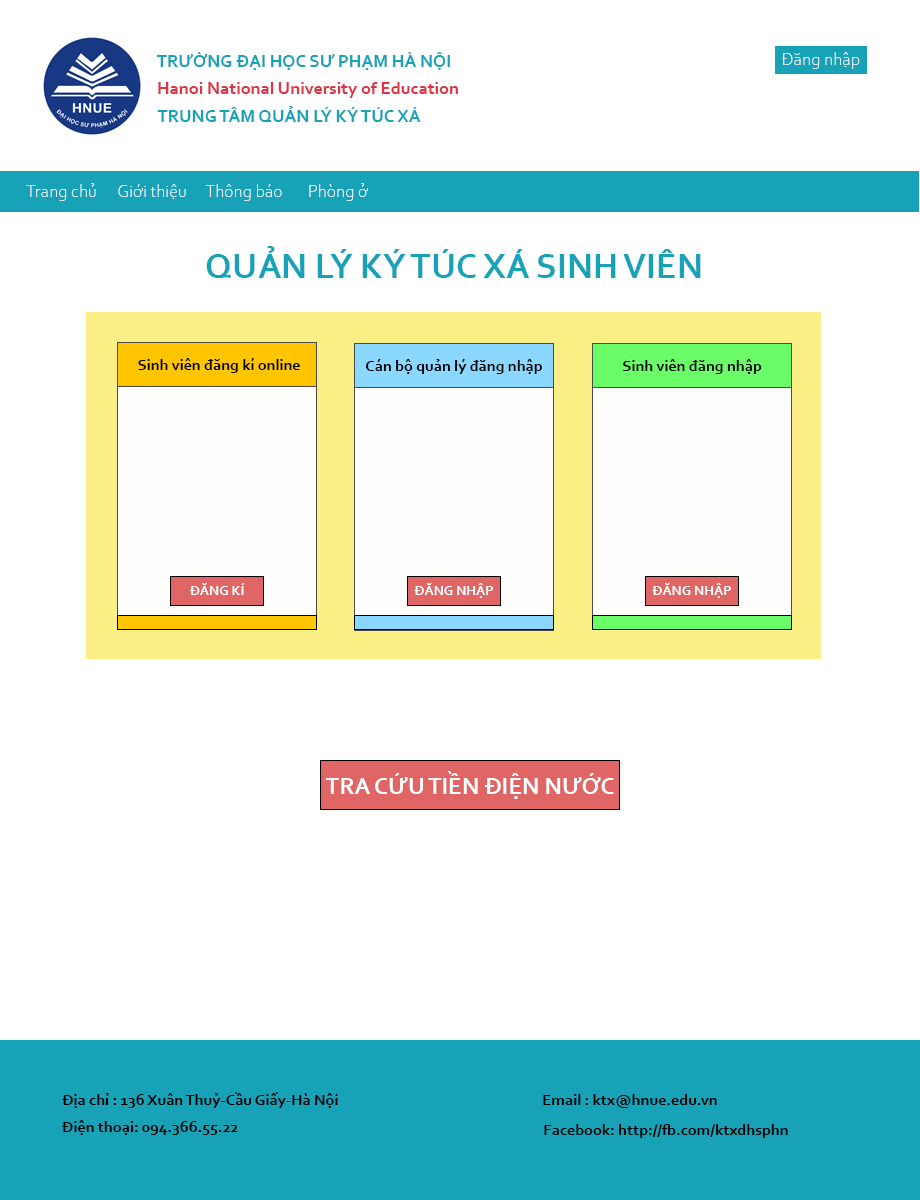
<style>
.page{position:relative;width:920px;height:1200px;background:#ffffff}
.page>*{position:absolute;margin:0}
.t1{font:18px "Corbel-Bold";color:#17a2b8}
.t2{font:18px "CorbelLight";color:#fefefd}
.t3{font:18px "Corbel-Bold";color:#dc3545}
.t4{font:18px "CorbelLight";color:#ffffff}
.t5{font:36px "Corbel-Bold";color:#17a2b8}
.t6{font:16px "Corbel-Bold";color:#010101}
.t7{font:16px "Corbel-Bold";color:#000000}
.t8{font:14px "Corbel-Bold";color:#ffffff}
.t9{font:14px "Corbel-Bold";color:#fefefe}
.t10{font:24px "Corbel-Bold";color:#ffffff}
</style>
<div class="page">
<p class="t1" style="left:156px;top:52px;width:294px;height:18px">TRƯỜNG ĐẠI HỌC SƯ PHẠM HÀ NỘI</p>
<p class="t2" style="left:782px;top:52px;width:78px;height:17px">Đăng nhập</p>
<p class="t3" style="left:158px;top:82px;width:300px;height:16px">Hanoi National University of Education</p>
<p class="t1" style="left:157px;top:106px;width:264px;height:16px">TRUNG TÂM QUẢN LÝ KÝ TÚC XÁ</p>
<p class="t4" style="left:26px;top:183px;width:70px;height:18px">Trang chủ</p>
<p class="t4" style="left:118px;top:184px;width:68px;height:15px">Giới thiệu</p>
<p class="t4" style="left:205px;top:184px;width:77px;height:17px">Thông báo</p>
<p class="t4" style="left:309px;top:183px;width:59px;height:18px">Phòng ở</p>
<p class="t5" style="left:206px;top:246px;width:495px;height:32px">QUẢN LÝ KÝ TÚC XÁ SINH VIÊN</p>
<p class="t6" style="left:138px;top:358px;width:162px;height:15px">Sinh viên đăng kí online</p>
<p class="t7" style="left:365px;top:359px;width:177px;height:15px">Cán bộ quản lý đăng nhập</p>
<p class="t7" style="left:623px;top:359px;width:139px;height:15px">Sinh viên đăng nhập</p>
<p class="t8" style="left:190px;top:583px;width:55px;height:12px">ĐĂNG KÍ</p>
<p class="t9" style="left:414px;top:583px;width:80px;height:15px">ĐĂNG NHẬP</p>
<p class="t8" style="left:652px;top:583px;width:80px;height:15px">ĐĂNG NHẬP</p>
<p class="t10" style="left:325px;top:771px;width:289px;height:28px">TRA CỨU TIỀN ĐIỆN NƯỚC</p>
<p class="t7" style="left:62px;top:1092px;width:276px;height:16px">Địa chỉ : 136 Xuân Thuỷ-Cầu Giấy-Hà Nội</p>
<p class="t7" style="left:543px;top:1094px;width:174px;height:14px">Email : ktx@hnue.edu.vn</p>
<p class="t7" style="left:62px;top:1120px;width:176px;height:15px">Điện thoại: 094.366.55.22</p>
<p class="t7" style="left:544px;top:1124px;width:244px;height:14px">Facebook: http://fb.com/ktxdhsphn</p>
</div>
